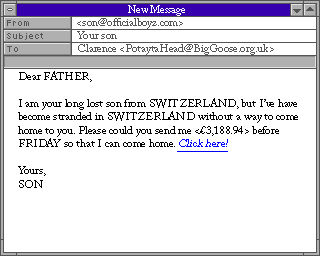
<style>
.page{position:relative;width:320px;height:256px;background:#ffffff}
.page>*{position:absolute;margin:0}
.t1{font:11.3px "ACaslonPro-Regular";color:#545454}
.t2{font:11.3px "ACaslonPro-Regular";color:#000000}
.t3{font:11.3px "ACaslonPro-Regular";color:#0000ff;font-style:italic;text-decoration:underline}
</style>
<div class="page">
<p class="t1" style="left:77px;top:18px;width:106px;height:11px">&lt;son@officialboyz.com&gt;</p>
<p class="t1" style="left:77px;top:31px;width:40px;height:8px">Your son</p>
<p class="t1" style="left:78px;top:44px;width:196px;height:11px">Clarence &lt;PotaytaHead@BigGoose.org.uk&gt;</p>
<p class="t2" style="left:18px;top:71px;width:280px;height:117px">Dear FATHER,<br><br>I am your long lost son from SWITZERLAND, but I’ve have<br>become stranded in SWITZERLAND without a way to come<br>home to you. Please could you send me &lt;£3,188.94&gt; before<br>FRIDAY so that I can come home. <span class="t3">Click here!<br></span><br>Yours, <br>SON</p>
</div>
